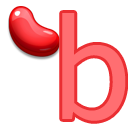
<style>
.page{position:relative;width:128px;height:128px;background:#ffffff}
.page>*{position:absolute;margin:0}
.t1{font:132.9px "SourceHanSansCN-Regular";color:#ff6e71}
</style>
<div class="page">
<p class="t1" style="left:62px;top:13px;width:64px;height:108px">b</p>
</div>
